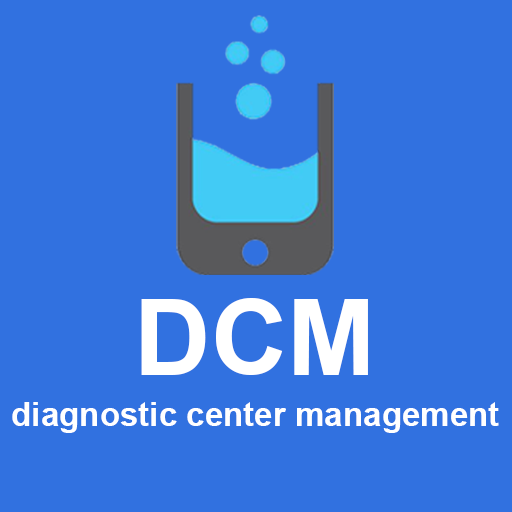
<style>
.page{position:relative;width:512px;height:512px;background:#3171e0}
.page>*{position:absolute;margin:0}
.t1{font:106.1px "Arial-BoldMT";color:#ffffff}
.t2{font:33.2px "Arial-BoldMT";color:#ffffff}
</style>
<div class="page">
<p class="t1" style="left:141px;top:298px;width:227px;height:77px">DCM</p>
<p class="t2" style="left:12px;top:402px;width:487px;height:31px">diagnostic center management</p>
</div>
